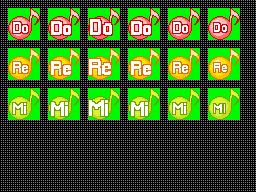
<style>
.page{position:relative;width:256px;height:192px;background:#000000}
.page>*{position:absolute;margin:0}
.t1{font:16px "Pixellari";letter-spacing:-0.05em;color:#ffffff}
.t2{font:20px "Pixellari";letter-spacing:-0.05em;color:#ffffff}
.t3{font:22.7px "Pixellari";letter-spacing:-0.05em;color:#ffffff}
.t4{font:13.3px "Pixellari";letter-spacing:-0.05em;color:#ffffff}
</style>
<div class="page">
<p class="t1" style="left:13px;top:22px;width:15px;height:11px">Do</p>
<p class="t2" style="left:51px;top:21px;width:20px;height:14px">Do</p>
<p class="t3" style="left:90px;top:19px;width:22px;height:16px">Do</p>
<p class="t2" style="left:131px;top:21px;width:20px;height:14px">Do</p>
<p class="t1" style="left:173px;top:22px;width:15px;height:11px">Do</p>
<p class="t4" style="left:214px;top:23px;width:13px;height:9px">Do</p>
<p class="t1" style="left:13px;top:62px;width:15px;height:11px">Re</p>
<p class="t2" style="left:51px;top:61px;width:20px;height:14px">Re</p>
<p class="t3" style="left:89px;top:59px;width:22px;height:16px">Re</p>
<p class="t2" style="left:131px;top:61px;width:20px;height:14px">Re</p>
<p class="t1" style="left:173px;top:62px;width:15px;height:11px">Re</p>
<p class="t4" style="left:214px;top:63px;width:13px;height:9px">Re</p>
<p class="t2" style="left:51px;top:102px;width:17px;height:14px">Mi</p>
<p class="t3" style="left:89px;top:100px;width:19px;height:16px">Mi</p>
<p class="t2" style="left:131px;top:102px;width:17px;height:14px">Mi</p>
<p class="t1" style="left:13px;top:103px;width:13px;height:11px">Mi</p>
<p class="t1" style="left:173px;top:103px;width:13px;height:11px">Mi</p>
<p class="t4" style="left:214px;top:104px;width:11px;height:9px">Mi</p>
</div>
